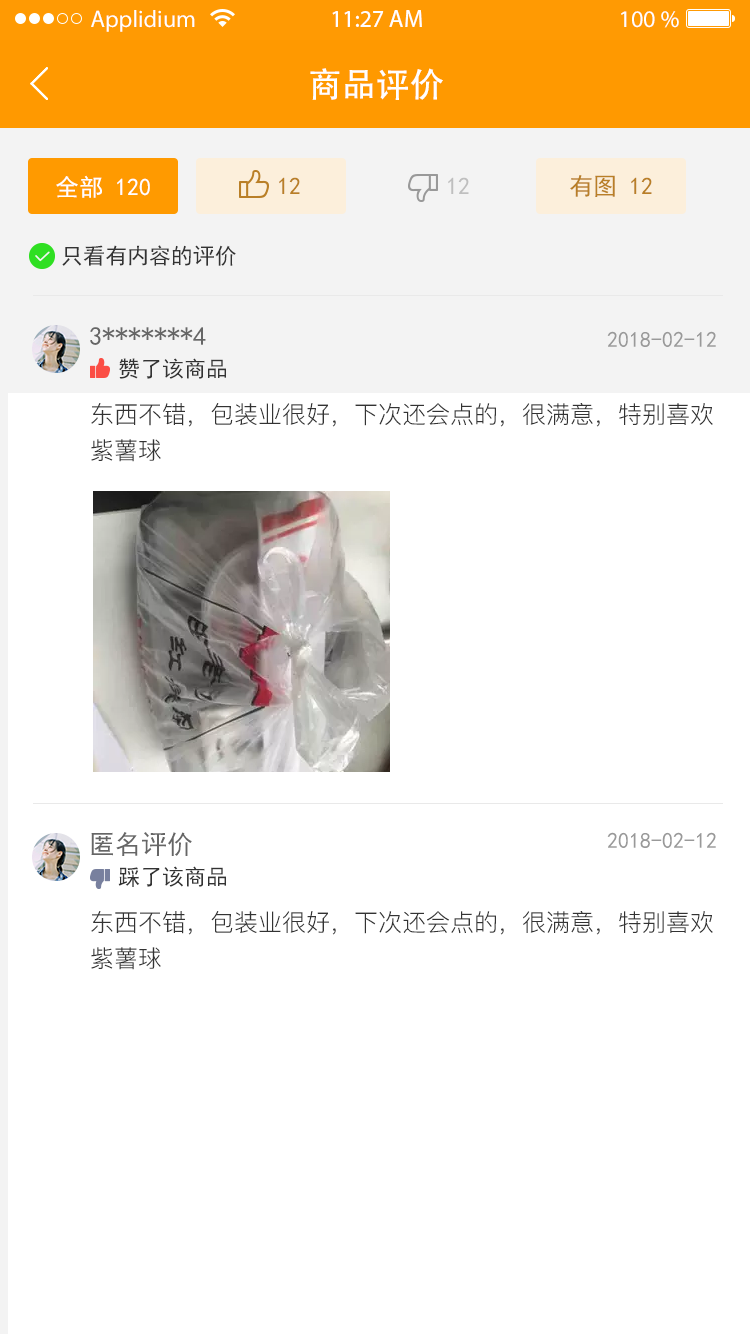
<style>
.page{position:relative;width:750px;height:1334px;background:#ffffff}
.page>*{position:absolute;margin:0}
.t1{font:24px "MyriadPro-Regular";color:#ffffff}
.t2{font:34px "AdobeHeitiStd-Regular";color:#ffffff}
.t3{font:24px "SimHei";color:#ffffff}
.t4{font:24px "SimHei";color:#b97f27}
.t5{font:24px "SimHei";color:#bfbfbf}
.t6{font:22px "SimHei";color:#333333}
.t7{font:26px "SimHei";color:#666666}
.t8{font:22px "SimHei";color:#999999}
.t9{font:24px/36px "PingFang-SC-Regular";color:#333333}
</style>
<div class="page">
<p class="t1" style="left:91px;top:10px;width:104px;height:22px">Applidium</p>
<p class="t1" style="left:332px;top:10px;width:90px;height:17px">11:27 AM</p>
<p class="t1" style="left:621px;top:11px;width:58px;height:17px">100 %</p>
<p class="t2" style="left:310px;top:68px;width:133px;height:32px">商品评价</p>
<p class="t3" style="left:56px;top:175px;width:94px;height:23px">全部 120</p>
<p class="t4" style="left:279px;top:177px;width:21px;height:17px">12</p>
<p class="t5" style="left:448px;top:177px;width:21px;height:17px">12</p>
<p class="t4" style="left:570px;top:175px;width:82px;height:22px">有图 12</p>
<p class="t6" style="left:62px;top:245px;width:174px;height:21px">只看有内容的评价</p>
<p class="t7" style="left:90px;top:327px;width:116px;height:18px">3*******4</p>
<p class="t8" style="left:607px;top:331px;width:109px;height:16px">2018-02-12</p>
<p class="t6" style="left:119px;top:358px;width:107px;height:21px">赞了该商品</p>
<p class="t9" style="left:91px;top:403px;width:622px;height:59px">东西不错，包装业很好，下次还会点的，很满意，特别喜欢紫薯球</p>
<p class="t7" style="left:91px;top:832px;width:101px;height:24px">匿名评价</p>
<p class="t8" style="left:607px;top:832px;width:109px;height:16px">2018-02-12</p>
<p class="t6" style="left:118px;top:866px;width:108px;height:21px">踩了该商品</p>
<p class="t9" style="left:91px;top:911px;width:622px;height:59px">东西不错，包装业很好，下次还会点的，很满意，特别喜欢紫薯球</p>
</div>
